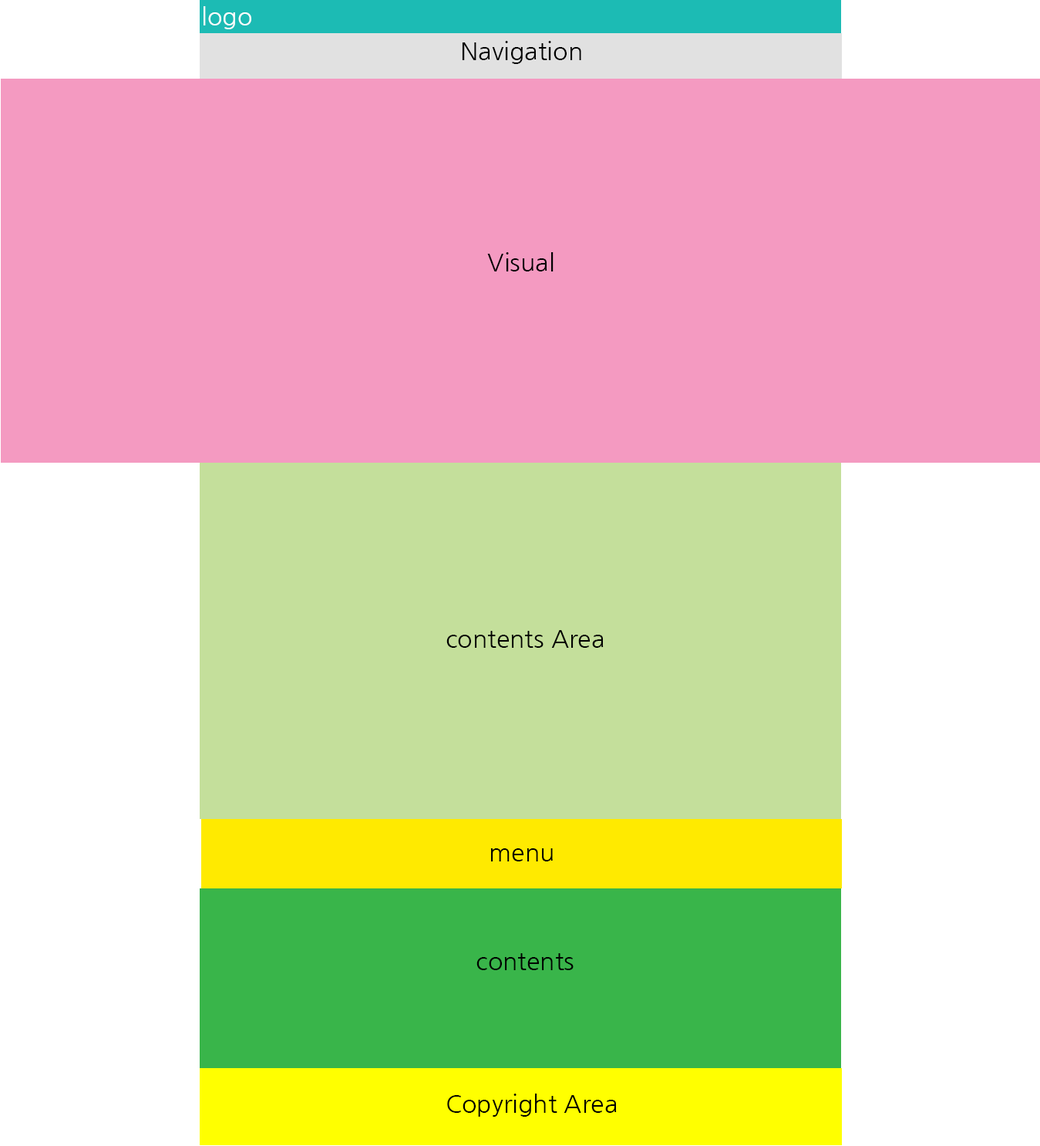
<style>
.page{position:relative;width:1040px;height:1146px;background:#f49ac1}
.page>*{position:absolute;margin:0}
.t1{font:24.7px "NanumGothic";color:#fdfdfd}
.t2{font:24.7px "NanumGothic";color:#000000}
</style>
<div class="page">
<p class="t1" style="left:204px;top:6px;width:47px;height:23px">logo</p>
<p class="t2" style="left:462px;top:41px;width:120px;height:23px">Navigation</p>
<p class="t2" style="left:487px;top:252px;width:67px;height:19px">Visual</p>
<p class="t2" style="left:447px;top:630px;width:157px;height:18px">contents Area</p>
<p class="t2" style="left:491px;top:848px;width:62px;height:13px">menu</p>
<p class="t2" style="left:477px;top:953px;width:97px;height:17px">contents</p>
<p class="t2" style="left:447px;top:1094px;width:170px;height:23px">Copyright Area</p>
</div>
